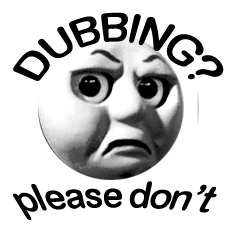
<style>
.page{position:relative;width:225px;height:225px;background:#ffffff}
.page>*{position:absolute;margin:0}
.t1{font:31px/9px "ArialRoundedMTBold";letter-spacing:-0.05em;color:#000000}
.t2{font:36px "ArialRoundedMTBold";letter-spacing:-0.05em;color:#000000}
</style>
<div class="page">
<p class="t1" style="left:13px;top:12px;width:211px;height:69px">DUBBING?</p>
<p class="t2" style="left:13px;top:181px;width:204px;height:39px">please don’t</p>
</div>
